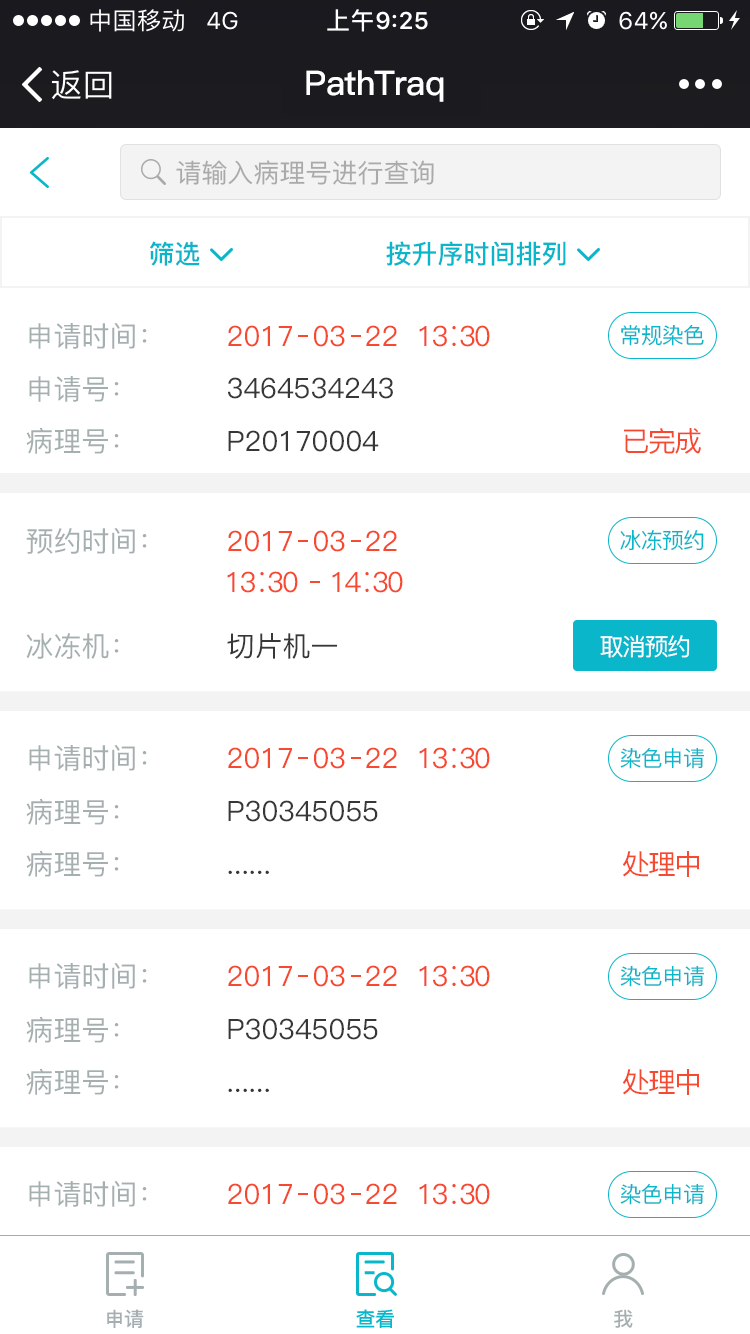
<style>
.page{position:relative;width:750px;height:1334px;background:#ffffff}
.page>*{position:absolute;margin:0}
.t1{font:34px "PingFang-SC-Bold";letter-spacing:-0.025em;color:#ffffff}
.t2{font:26px "PingFang-SC-Medium";color:#aaaaaa}
.t3{font:26px "PingFang-SC-Bold";color:#0ab6ca}
.t4{font:28px "PingFang-SC-Medium";color:#a5afb0}
.t5{font:28px "PingFang-SC-Medium";color:#f74830}
.t6{font:28px "PingFang-SC-Medium";letter-spacing:-0.06em;color:#f74830}
.t7{font:22px "PingFang-SC-Medium";letter-spacing:-0.04em;color:#0ab6ca}
.t8{font:28px "PingFang-SC-Medium";color:#373737}
.t9{font:24px "PingFang-SC-Medium";letter-spacing:-0.06em;color:#ffffff}
.t10{font:20px "PingFang-SC-Bold";letter-spacing:-0.025em;color:#a5afb0}
.t11{font:20px "PingFang-SC-Bold";letter-spacing:-0.025em;color:#0ab6ca}
</style>
<div class="page">
<p class="t1" style="left:306px;top:70px;width:138px;height:32px">PathTraq</p>
<p class="t2" style="left:176px;top:160px;width:258px;height:25px">请输入病理号进行查询</p>
<p class="t3" style="left:150px;top:241px;width:50px;height:25px">筛选</p>
<p class="t3" style="left:386px;top:241px;width:180px;height:25px">按升序时间排列</p>
<p class="t4" style="left:29px;top:323px;width:118px;height:26px">申请时间：</p>
<p class="t5" style="left:228px;top:325px;width:169px;height:22px">2017  03  22</p>
<p class="t6" style="left:419px;top:325px;width:71px;height:22px">13∶30</p>
<p class="t7" style="left:621px;top:324px;width:83px;height:22px">常规染色</p>
<p class="t4" style="left:29px;top:376px;width:90px;height:26px">申请号：</p>
<p class="t8" style="left:228px;top:377px;width:165px;height:22px">3464534243</p>
<p class="t4" style="left:26px;top:427px;width:93px;height:27px">病理号：</p>
<p class="t8" style="left:228px;top:430px;width:151px;height:22px">P20170004</p>
<p class="t6" style="left:624px;top:428px;width:77px;height:26px">已完成</p>
<p class="t4" style="left:26px;top:528px;width:121px;height:26px">预约时间：</p>
<p class="t5" style="left:228px;top:530px;width:169px;height:22px">2017  03  22</p>
<p class="t7" style="left:620px;top:529px;width:84px;height:22px">冰冻预约</p>
<p class="t6" style="left:227px;top:571px;width:71px;height:22px">13∶30</p>
<p class="t6" style="left:332px;top:571px;width:71px;height:22px">14∶30</p>
<p class="t4" style="left:26px;top:633px;width:93px;height:26px">冰冻机：</p>
<p class="t8" style="left:227px;top:633px;width:110px;height:26px">切片机一</p>
<p class="t9" style="left:600px;top:635px;width:90px;height:23px">取消预约</p>
<p class="t4" style="left:29px;top:745px;width:118px;height:26px">申请时间：</p>
<p class="t5" style="left:228px;top:747px;width:169px;height:22px">2017  03  22</p>
<p class="t6" style="left:419px;top:747px;width:71px;height:22px">13∶30</p>
<p class="t7" style="left:620px;top:747px;width:85px;height:22px">染色申请</p>
<p class="t4" style="left:26px;top:798px;width:93px;height:27px">病理号：</p>
<p class="t8" style="left:228px;top:800px;width:150px;height:22px">P30345055</p>
<p class="t4" style="left:26px;top:850px;width:93px;height:27px">病理号：</p>
<p class="t6" style="left:623px;top:851px;width:76px;height:26px">处理中</p>
<p class="t8" style="left:228px;top:870px;width:41px;height:4px">......</p>
<p class="t4" style="left:29px;top:963px;width:118px;height:26px">申请时间：</p>
<p class="t5" style="left:228px;top:965px;width:169px;height:22px">2017  03  22</p>
<p class="t6" style="left:419px;top:965px;width:71px;height:22px">13∶30</p>
<p class="t7" style="left:620px;top:965px;width:85px;height:22px">染色申请</p>
<p class="t4" style="left:26px;top:1016px;width:93px;height:27px">病理号：</p>
<p class="t8" style="left:228px;top:1018px;width:150px;height:22px">P30345055</p>
<p class="t4" style="left:26px;top:1068px;width:93px;height:27px">病理号：</p>
<p class="t6" style="left:623px;top:1069px;width:76px;height:26px">处理中</p>
<p class="t8" style="left:228px;top:1088px;width:41px;height:4px">......</p>
<p class="t4" style="left:29px;top:1181px;width:118px;height:26px">申请时间：</p>
<p class="t5" style="left:228px;top:1183px;width:169px;height:22px">2017  03  22</p>
<p class="t6" style="left:419px;top:1183px;width:71px;height:22px">13∶30</p>
<p class="t7" style="left:620px;top:1183px;width:85px;height:22px">染色申请</p>
<p class="t10" style="left:107px;top:1309px;width:37px;height:19px">申请</p>
<p class="t11" style="left:356px;top:1309px;width:38px;height:19px">查看</p>
<p class="t10" style="left:614px;top:1309px;width:19px;height:19px">我</p>
</div>
